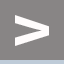
<style>
.page{position:relative;width:64px;height:64px;background:#888585}
.page>*{position:absolute;margin:0}
.t1{font:50px "MyriadPro-Bold";color:#fffcfc}
</style>
<div class="page">
<p class="t1" style="left:15px;top:15px;width:34px;height:31px;rotate:-90deg">V</p>
</div>
